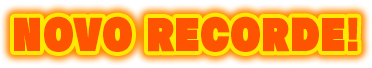
<style>
.page{position:relative;width:372px;height:68px;background:#fe5300}
.page>*{position:absolute;margin:0}
.t1{font:42.7px "RaglanStd-UB";letter-spacing:0.005em;color:#fe5300;scale:0.85 1}
</style>
<div class="page">
<p class="t1" style="left:14px;top:16px;width:344px;height:36px">NOVO RECORDE!</p>
</div>
